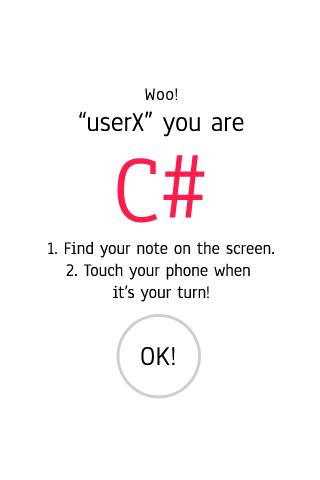
<style>
.page{position:relative;width:320px;height:480px;background:#ffffff}
.page>*{position:absolute;margin:0}
.t1{font:18px "Anaheim-Regular";letter-spacing:0.035em;color:#000000}
.t2{font:28px "Anaheim-Regular";letter-spacing:-0.005em;color:#000000}
.t3{font:100px "Anaheim-Regular";letter-spacing:-0.005em;color:#fc1d4c}
.t4{font:18px/22px "Anaheim-Regular";letter-spacing:-0.005em;color:#000000}
.t5{font:28px "Anaheim-Regular";letter-spacing:0.015em;color:#000000}
</style>
<div class="page">
<p class="t1" style="left:145px;top:88px;width:32px;height:12px">Woo!<span class="t2"></span></p>
<p class="t2" style="left:79px;top:111px;width:165px;height:26px">“userX” you are</p>
<p class="t3" style="left:117px;top:155px;width:88px;height:68px">C#</p>
<p class="t4" style="left:48px;top:241px;width:226px;height:61px;text-align:center">1. Find your note on the screen.<br>2. Touch your phone when <br>it’s your turn!</p>
<p class="t5" style="left:141px;top:347px;width:34px;height:19px">OK!</p>
</div>
